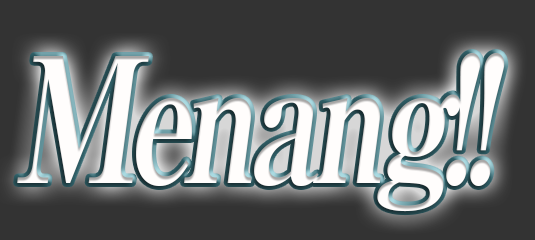
<style>
.page{position:relative;width:535px;height:240px;background:#333333}
.page>*{position:absolute;margin:0}
.t1{font:174px "RyuminPro-ExBold";letter-spacing:-0.08em;color:#fffdfc;font-style:italic;scale:0.75 1}
</style>
<div class="page">
<p class="t1" style="left:17px;top:53px;width:488px;height:159px">Menang!!</p>
</div>
